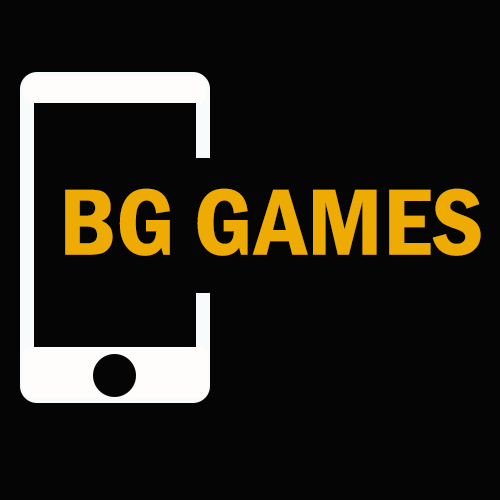
<style>
.page{position:relative;width:500px;height:500px;background:#050505}
.page>*{position:absolute;margin:0}
.t1{font:97.2px "FranklinGothic-DemiCond";color:#edab03;scale:1.04 1}
</style>
<div class="page">
<p class="t1" style="left:65px;top:188px;width:416px;height:68px">BG GAMES</p>
</div>
